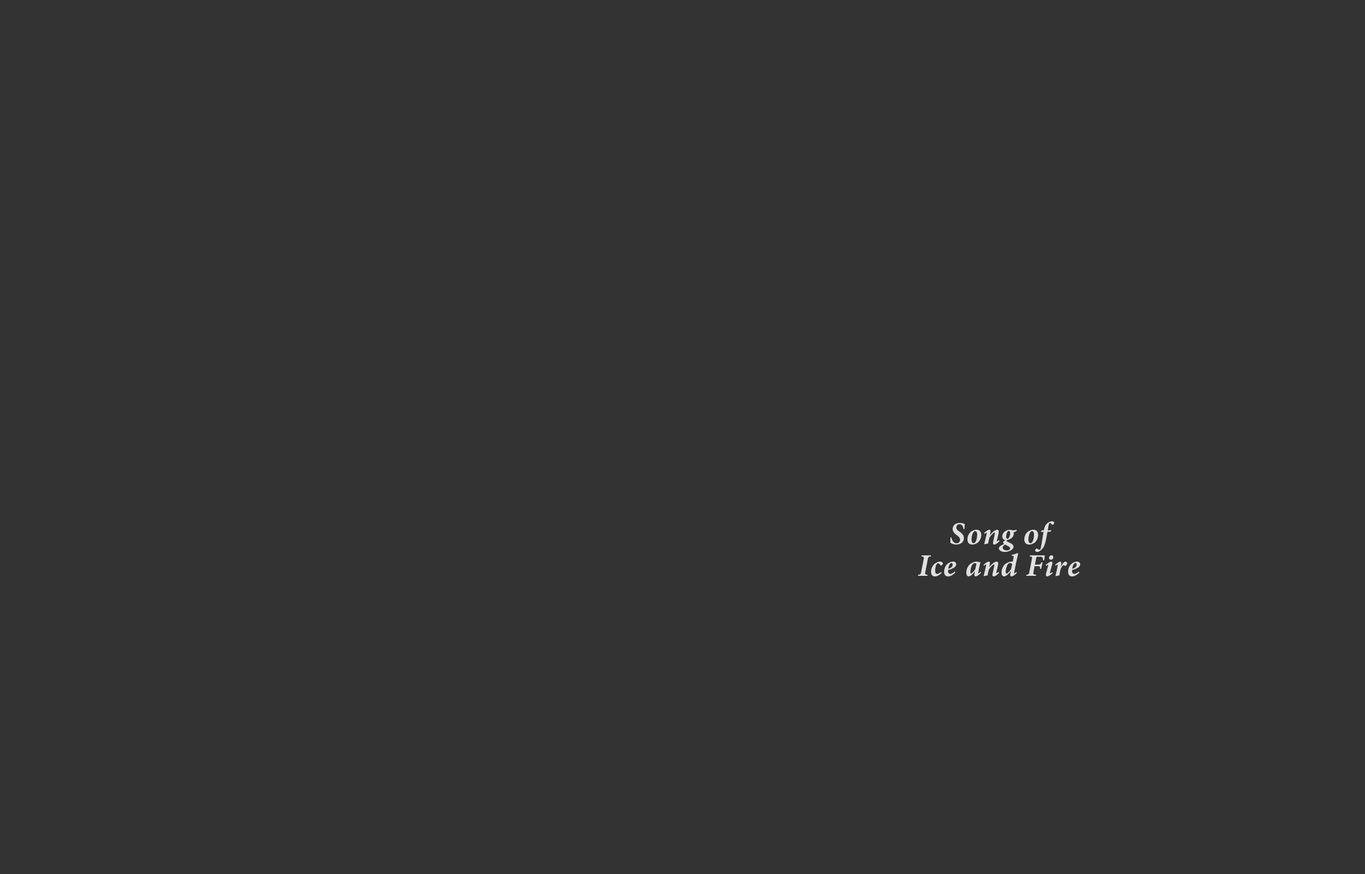
<style>
.page{position:relative;width:1365px;height:874px;background:#333333}
.page>*{position:absolute;margin:0}
.t1{font:31.7px/31.7px "MinionPro-BoldIt";letter-spacing:0.025em;color:#e0e0e0}
</style>
<div class="page">
<p class="t1" style="left:918px;top:521px;width:163px;height:55px;text-align:center">Song of<br>Ice and Fire</p>
</div>
